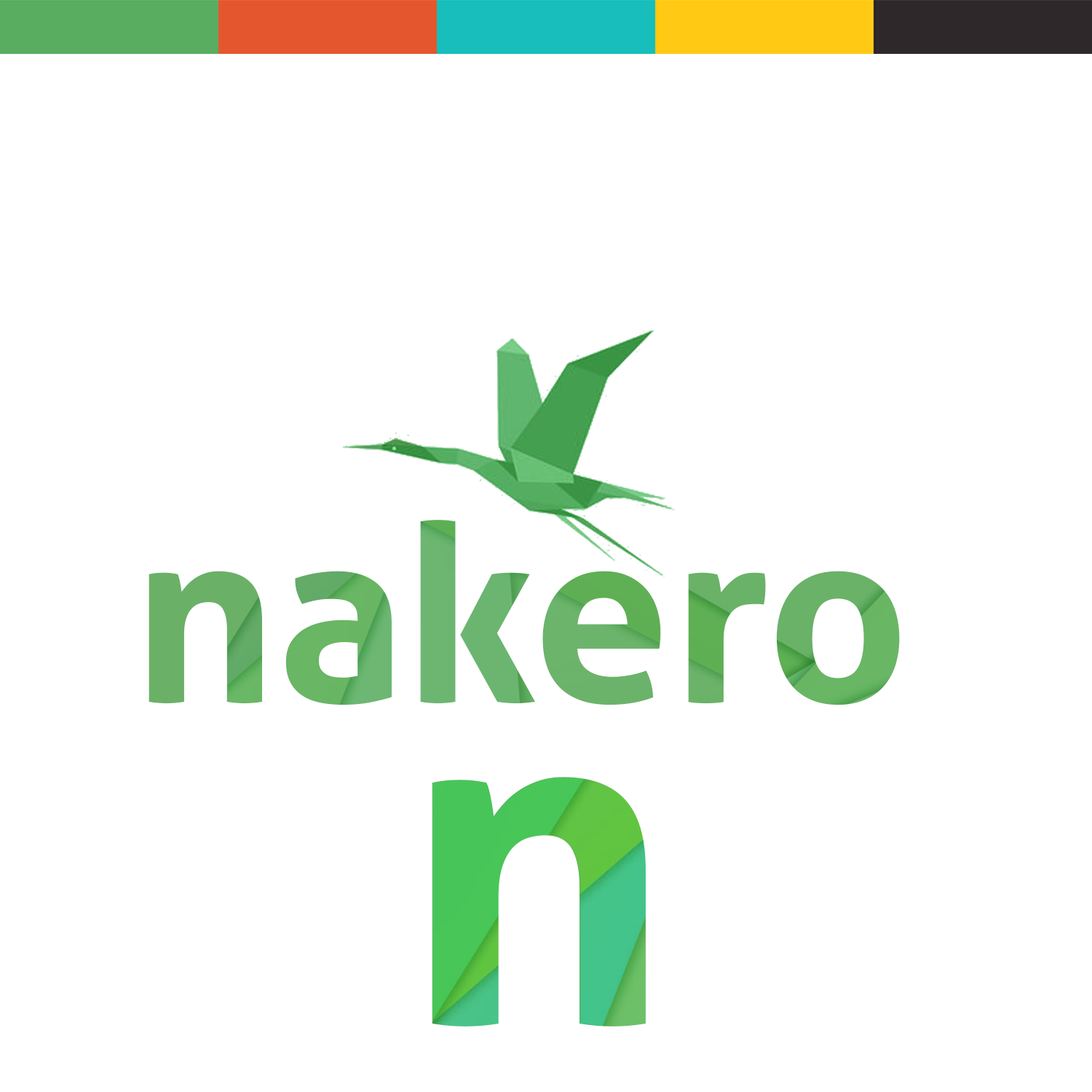
<style>
.page{position:relative;width:1092px;height:1092px;background:#ffffff}
.page>*{position:absolute;margin:0}
.t1{font:246.5px "Aller-Bold";color:#58ad60}
.t2{font:465.6px "Aller-Bold"}
</style>
<div class="page">
<p class="t1" style="left:149px;top:520px;width:751px;height:185px">nakero</p>
<p class="t2" style="left:432px;top:777px;width:214px;height:249px">n</p>
</div>
